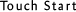
<style>
.page{position:relative;width:76px;height:12px;background:#ffffff}
.page>*{position:absolute;margin:0}
.t1{font:13.2px "Amira-Roman";letter-spacing:0.151em;color:#000000;scale:0.91 1}
</style>
<div class="page">
<p class="t1" style="left:0px;top:0px;width:77px;height:11px">Touch Start</p>
</div>
